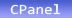
<style>
.page{position:relative;width:72px;height:18px}
.page>*{position:absolute;margin:0}
.t1{font:14px "Consolas";color:#ffffff;scale:1.1 1}
</style>
<div class="page">
<p class="t1" style="left:10px;top:4px;width:51px;height:11px">CPanel</p>
</div>
